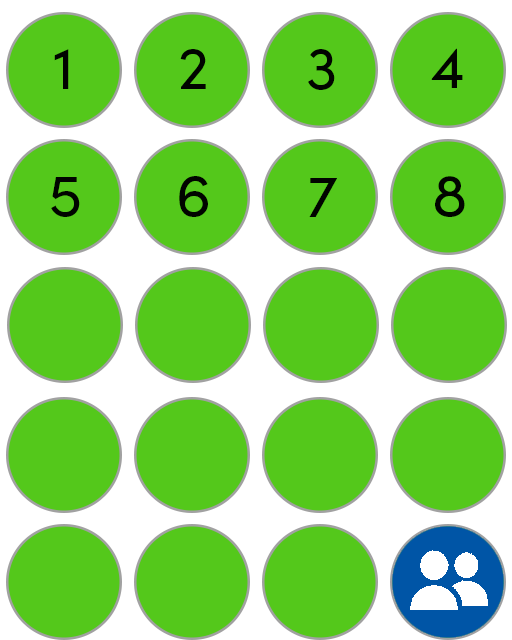
<style>
.page{position:relative;width:512px;height:640px;background:#54c81b}
.page>*{position:absolute;margin:0}
.t1{font:60px "SofiaProRegular";color:#010400}
</style>
<div class="page">
<p class="t1" style="left:54px;top:49px;width:15px;height:40px">1</p>
<p class="t1" style="left:180px;top:49px;width:26px;height:40px">2</p>
<p class="t1" style="left:308px;top:49px;width:27px;height:41px">3</p>
<p class="t1" style="left:431px;top:48px;width:32px;height:40px">4</p>
<p class="t1" style="left:51px;top:177px;width:29px;height:40px">5</p>
<p class="t1" style="left:179px;top:176px;width:29px;height:41px">6</p>
<p class="t1" style="left:309px;top:178px;width:28px;height:39px">7</p>
<p class="t1" style="left:435px;top:176px;width:30px;height:41px">8</p>
</div>
